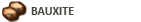
<style>
.page{position:relative;width:141px;height:22px;background:#ffffff}
.page>*{position:absolute;margin:0}
.t1{font:12px "Calibri-Bold";color:#4c4843}
</style>
<div class="page">
<p class="t1" style="left:31px;top:7px;width:43px;height:8px">BAUXITE</p>
</div>
